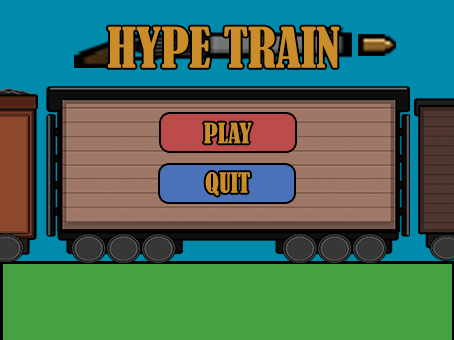
<style>
.page{position:relative;width:454px;height:340px;background:#45a142}
.page>*{position:absolute;margin:0}
.t1{font:52px "BernardMT-Condensed";color:#cb8d2a}
.t2{font:48px "BernardMT-Condensed";color:#cb8d2a}
.t3{font:26px "BernardMT-Condensed";color:#cb8d2a}
</style>
<div class="page">
<p class="t1" style="left:108px;top:26px;width:232px;height:42px"><span class="t2">  </span>HYPE TRAIN</p>
<p class="t3" style="left:204px;top:122px;width:48px;height:22px">PLAY</p>
<p class="t3" style="left:205px;top:172px;width:45px;height:24px">QUIT</p>
</div>
